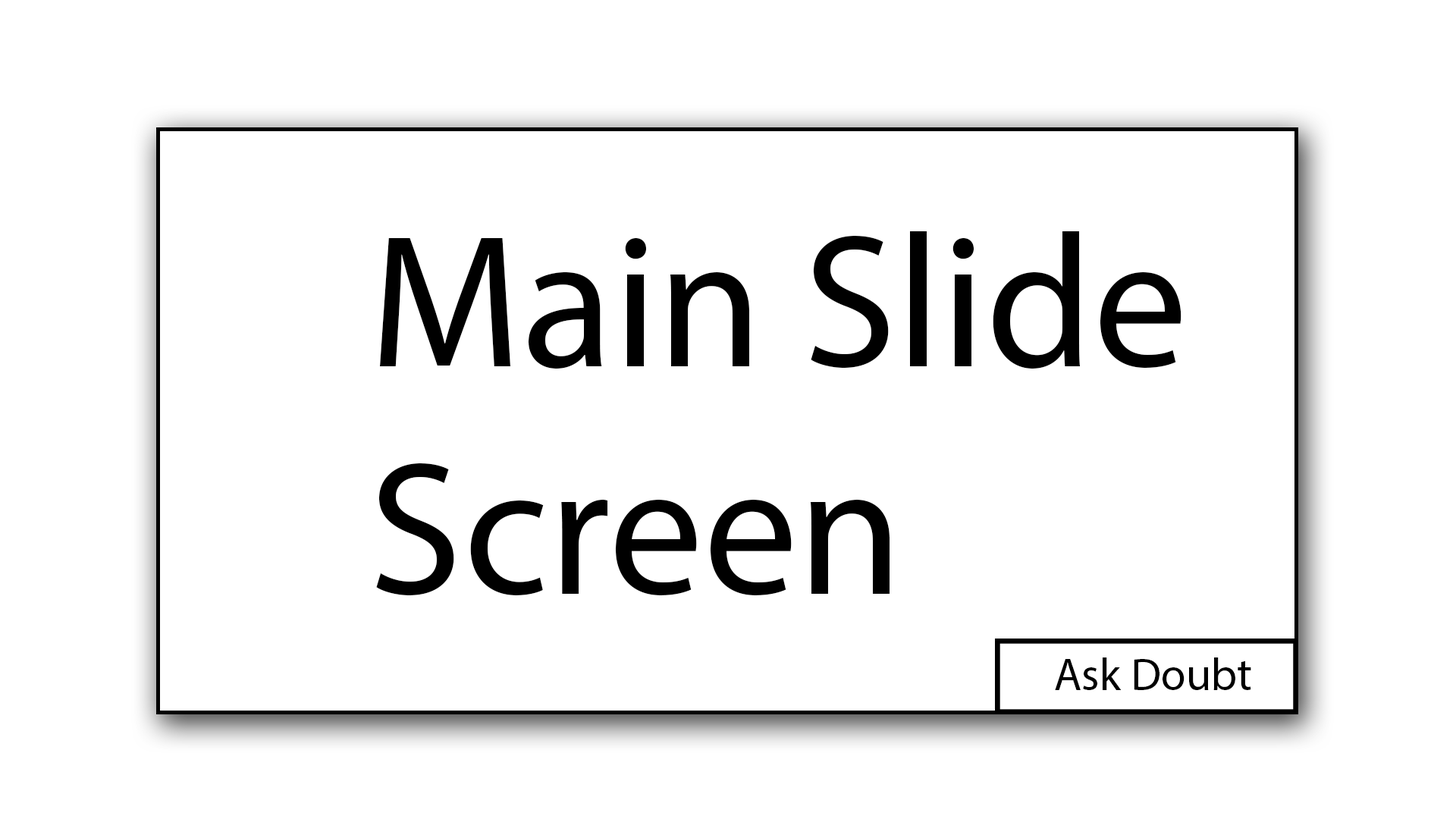
<style>
.page{position:relative;width:1456px;height:819px;background:#ffffff}
.page>*{position:absolute;margin:0}
.t1{font:189.6px "MyriadPro-Regular";color:#000000}
.t2{font:45.5px "MyriadPro-Regular";color:#000000}
</style>
<div class="page">
<p class="t1" style="left:376px;top:231px;width:805px;height:364px">Main Slide Screen</p>
<p class="t2" style="left:1055px;top:657px;width:196px;height:33px">Ask Doubt</p>
</div>
